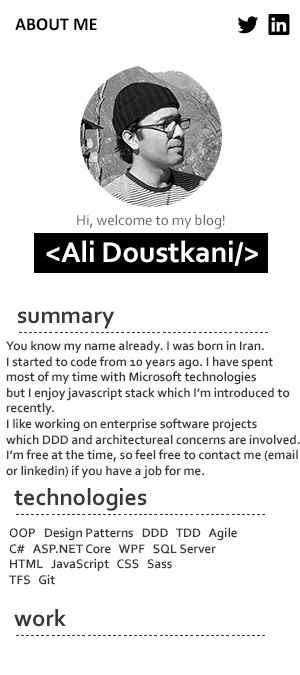
<style>
.page{position:relative;width:300px;height:675px;background:#ffffff}
.page>*{position:absolute;margin:0}
.t1{font:18px "Calibri-Bold";color:#000000}
.t2{font:15px "Corbel";color:#666666}
.t3{font:30px "Corbel-Bold";color:#fefefe}
.t4{font:24px "Corbel-Bold";color:#393939}
.t5{font:13px "Corbel-Bold";color:#393939}
</style>
<div class="page">
<p class="t1" style="left:15px;top:18px;width:82px;height:13px">ABOUT ME</p>
<p class="t2" style="left:77px;top:214px;width:148px;height:15px">Hi, welcome to my blog!</p>
<p class="t3" style="left:46px;top:240px;width:212px;height:26px">&lt;Ali Doustkani/&gt;</p>
<p class="t4" style="left:18px;top:311px;width:97px;height:18px">summary</p>
<p class="t5" style="left:6px;top:340px;width:294px;height:139px">You know my name already. I was born in Iran.<br>I started to code from 10 years ago. I have spent <br>most of my time with Microsoft technologies<br>but I enjoy javascript stack which I’m introduced to <br>recently.<br>I like working on enterprise software projects <br>which DDD and architectureal concerns are involved.<br>I’m free at the time, so feel free to contact me (email <br>or linkedin) if you have a job for me.</p>
<p class="t4" style="left:14px;top:488px;width:133px;height:23px">technologies</p>
<p class="t5" style="left:9px;top:527px;width:228px;height:58px">OOP   Design Patterns   DDD   TDD   Agile<br>C#   ASP.NET Core   WPF   SQL Server   <br>HTML   JavaScript   CSS   Sass<br>TFS   Git</p>
<p class="t4" style="left:14px;top:609px;width:52px;height:18px">work</p>
</div>
